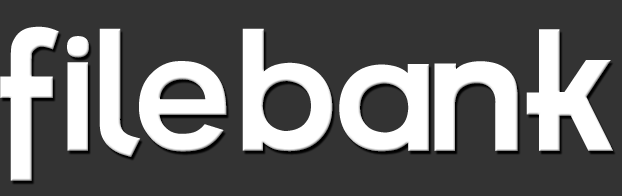
<style>
.page{position:relative;width:622px;height:196px;background:#333333}
.page>*{position:absolute;margin:0}
.t1{font:145.5px "Futurama-Bold-Font";letter-spacing:-0.05em;color:#ffffff}
</style>
<div class="page">
<p class="t1" style="left:0px;top:26px;width:613px;height:155px">filebank</p>
</div>
